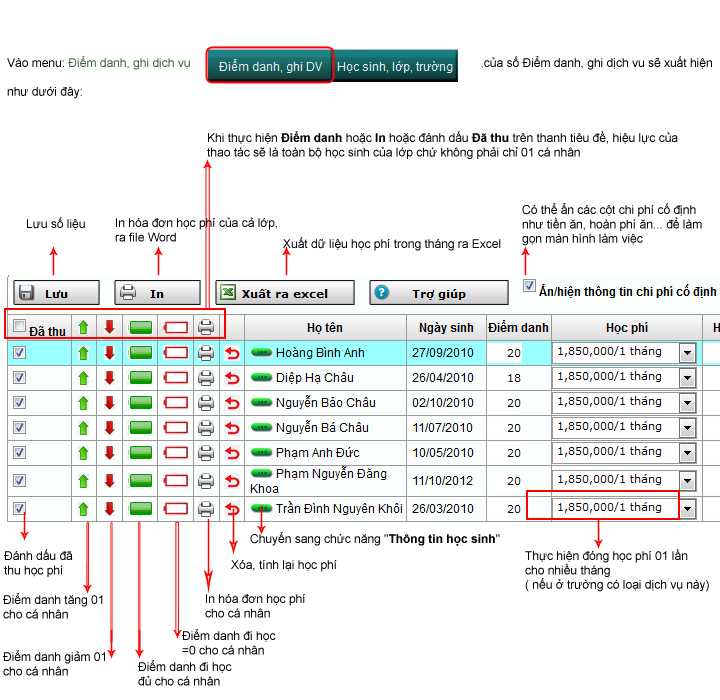
<style>
.page{position:relative;width:720px;height:700px;background:#ffffff}
.page>*{position:absolute;margin:0}
.t1{font:12px "ArialMT";color:#336633}
.t2{font:12px "ArialMT";color:#000000}
.t3{font:12px "Arial-BoldMT";color:#000000}
</style>
<div class="page">
<p class="t1" style="left:7px;top:56px;width:705px;height:43px"><span class="t2">Vào menu: </span>Điểm danh, ghi dịch vụ                                                                                       ,<span class="t2">của số Điểm danh, ghi dịch vu sẽ xuất hiện<br><br>như dưới đây:</span></p>
<p class="t2" style="left:207px;top:131px;width:471px;height:28px">Khi thực hiện <span class="t3">Điểm danh</span> hoặc <span class="t3">In</span> hoặc đánh dấu <span class="t3">Đã thu</span> trên thanh tiêu đề, hiệu lực của <br>thao tác sẽ là toàn bộ học sinh của lớp chứ không phải chỉ 01 cá nhân</p>
<p class="t2" style="left:522px;top:203px;width:180px;height:43px">Có thể ẩn các cột chi phí cố định <br>như tiền ăn, hoàn phí ăn... để làm<br>gọn màn hình làm việc</p>
<p class="t2" style="left:27px;top:217px;width:58px;height:13px">Lưu số liệu</p>
<p class="t2" style="left:115px;top:217px;width:162px;height:25px">In hóa đơn học phí của cả lớp,<br>ra file Word</p>
<p class="t2" style="left:283px;top:237px;width:218px;height:14px">Xuất dữ liệu học phí trong tháng ra Excel</p>
<p class="t2" style="left:250px;top:532px;width:250px;height:14px">Chuyển sang chức năng "<span class="t3">Thông tin học sinh</span>"</p>
<p class="t2" style="left:4px;top:549px;width:69px;height:28px">Đánh dấu đã <br>thu học phí</p>
<p class="t2" style="left:525px;top:549px;width:184px;height:43px">Thực hiện đóng học phí 01 lần <br>cho nhiều tháng <br>( nếu ở trường có loại dịch vụ này)</p>
<p class="t2" style="left:231px;top:560px;width:106px;height:12px">Xóa, tính lại học phí</p>
<p class="t2" style="left:3px;top:593px;width:100px;height:26px">Điểm danh tăng 01 <br>cho cá nhân</p>
<p class="t2" style="left:205px;top:594px;width:100px;height:24px">In hóa đơn học phí <br>cho cá nhân</p>
<p class="t2" style="left:182px;top:629px;width:94px;height:26px">Điểm danh đi học <br>=0 cho cá nhân</p>
<p class="t2" style="left:3px;top:650px;width:102px;height:26px">Điểm danh giảm 01 <br>cho cá nhân</p>
<p class="t2" style="left:138px;top:660px;width:94px;height:26px">Điểm danh đi học <br>đủ cho cá nhân</p>
</div>
